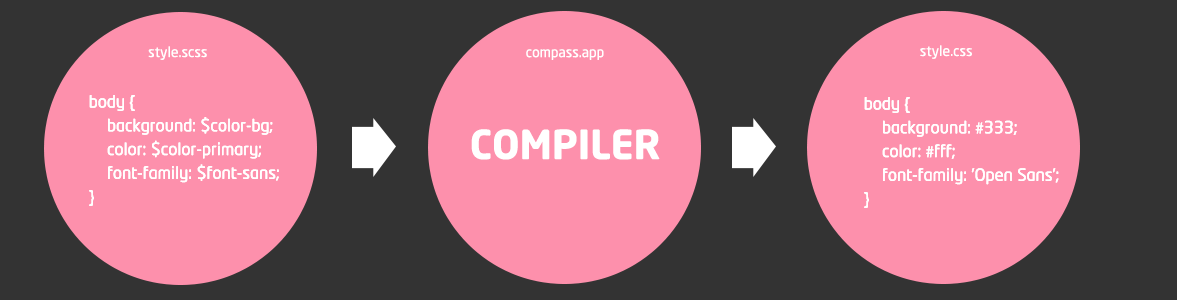
<style>
.page{position:relative;width:1177px;height:300px;background:#333333}
.page>*{position:absolute;margin:0}
.t1{font:14px "NeoSans";color:#ffffff}
.t2{font:16.6px/23.7px "NeoTech";color:#ffffff}
.t3{font:16.6px/23.7px "MyriadPro-Regular";color:#ffffff}
.t4{font:39.6px "NeoSans-Bold";color:#ffffff}
</style>
<div class="page">
<p class="t1" style="left:148px;top:46px;width:59px;height:14px">style.scss</p>
<p class="t1" style="left:526px;top:49px;width:78px;height:11px">compass.app</p>
<p class="t1" style="left:920px;top:45px;width:52px;height:14px">style.css</p>
<p class="t2" style="left:89px;top:95px;width:190px;height:111px">body {<br>    background: $color-bg;<br>    color: $color-primary;<br>    font-family: $font-sans;<br>}</p>
<p class="t2" style="left:89px;top:95px;width:190px;height:111px">body {<br>    background: $color-bg;<br>    color: $color-primary;<br>    font-family: $font-sans;<br>}</p>
<p class="t2" style="left:864px;top:97px;width:195px;height:111px">body {<br>    background: <span class="t3">#</span>333;<br>    color: <span class="t3">#</span>fff;<br>    font-family: ’Open Sans’;<br>}</p>
<p class="t2" style="left:864px;top:97px;width:195px;height:111px">body {<br>    background: <span class="t3">#</span>333;<br>    color: <span class="t3">#</span>fff;<br>    font-family: ’Open Sans’;<br>}</p>
<p class="t4" style="left:471px;top:129px;width:189px;height:31px">COMPILER</p>
</div>
